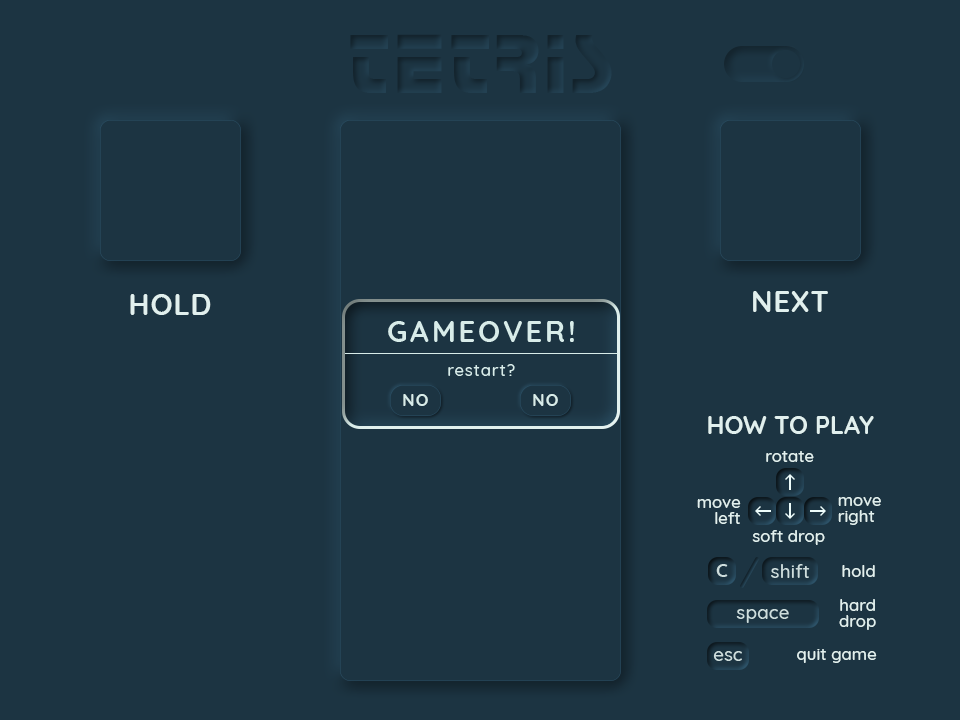
<style>
.page{position:relative;width:960px;height:720px;background:#1c3442}
.page>*{position:absolute;margin:0}
.t1{font:29.2px "#9Slide03QuicksandBold-Bold";letter-spacing:0.025em;color:#e1f0ee;text-transform:uppercase}
.t2{font:16.7px "#9Slide03QuicksandBold-Bold";letter-spacing:0.075em;color:#d8ece9;text-transform:uppercase}
.t3{font:25px "#9Slide03QuicksandBold-Bold";color:#e1f0ee;text-transform:uppercase}
.t4{font:16.7px "#9Slide03QuicksandMedium";color:#e1f0ee}
.t5{font:16.7px/16.7px "#9Slide03QuicksandMedium";color:#e1f0ee}
</style>
<div class="page">
<p class="t1" style="left:130px;top:294px;width:81px;height:21px">hold</p>
<p class="t1" style="left:753px;top:291px;width:75px;height:21px">next</p>
<p class="t2" style="left:403px;top:394px;width:25px;height:12px">no</p>
<p class="t2" style="left:533px;top:394px;width:25px;height:12px">no</p>
<p class="t3" style="left:708px;top:416px;width:166px;height:18px">how to play</p>
<p class="t4" style="left:766px;top:451px;width:48px;height:11px">rotate</p>
<p class="t5" style="left:838px;top:497px;width:43px;height:28px">move<br>right</p>
<p class="t5" style="left:697px;top:499px;width:44px;height:25px;text-align:right">move<br>left</p>
<p class="t4" style="left:752px;top:530px;width:73px;height:15px">soft drop</p>
<p class="t4" style="left:842px;top:565px;width:33px;height:12px">hold</p>
<p class="t5" style="left:839px;top:599px;width:37px;height:31px;text-align:center">hard<br>drop</p>
<p class="t4" style="left:797px;top:649px;width:80px;height:14px">quit game</p>
</div>
